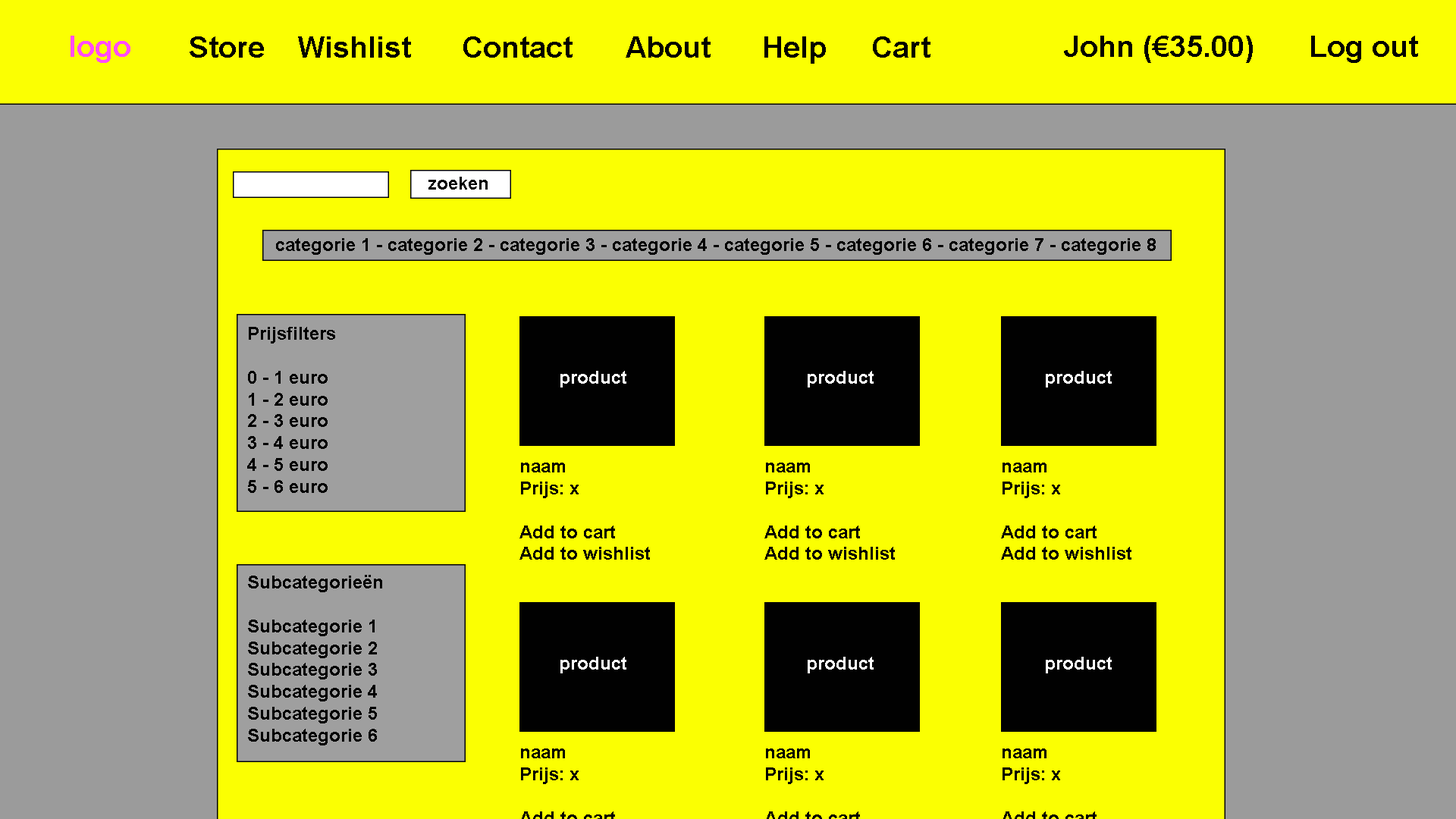
<style>
.page{position:relative;width:1456px;height:819px;background:#fbff02}
.page>*{position:absolute;margin:0}
.t1{font:29.6px "Arial-BoldMT";color:#ff4cff}
.t2{font:29.6px "Arial-BoldMT";color:#000000}
.t3{font:29.6px "Arial-BoldMT";color:#010101}
.t4{font:18.2px "Arial-BoldMT";color:#010101}
.t5{font:18.2px "Arial-BoldMT";color:#000000}
.t6{font:18.2px "Arial-BoldMT";color:#ffffff}
</style>
<div class="page">
<p class="t1" style="left:71px;top:36px;width:59px;height:27px">logo</p>
<p class="t2" style="left:190px;top:36px;width:740px;height:28px">Store  Wishlist  Contact  About  Help  Cart</p>
<p class="t3" style="left:1064px;top:36px;width:354px;height:27px">John (€35.00)  Log out</p>
<p class="t4" style="left:428px;top:177px;width:60px;height:13px">zoeken</p>
<p class="t5" style="left:276px;top:238px;width:880px;height:17px">categorie 1 - categorie 2 - categorie 3 - categorie 4 - categorie 5 - categorie 6 - categorie 7 - categorie 8</p>
<p class="t5" style="left:247px;top:327px;width:88px;height:166px">Prijsfilters<br><br>0 - 1 euro<br>1 - 2 euro<br>2 - 3 euro<br>3 - 4 euro<br>4 - 5 euro<br>5 - 6 euro</p>
<p class="t6" style="left:560px;top:371px;width:66px;height:17px">product</p>
<p class="t6" style="left:808px;top:371px;width:66px;height:17px">product</p>
<p class="t6" style="left:1046px;top:371px;width:66px;height:17px">product</p>
<p class="t4" style="left:519px;top:463px;width:131px;height:97px">naam<br>Prijs: x<br><br>Add to cart<br>Add to wishlist</p>
<p class="t4" style="left:764px;top:463px;width:131px;height:97px">naam<br>Prijs: x<br><br>Add to cart<br>Add to wishlist</p>
<p class="t4" style="left:1001px;top:463px;width:130px;height:97px">naam<br>Prijs: x<br><br>Add to cart<br>Add to wishlist</p>
<p class="t5" style="left:248px;top:575px;width:134px;height:170px">Subcategorieën<br><br>Subcategorie 1<br>Subcategorie 2<br>Subcategorie 3<br>Subcategorie 4<br>Subcategorie 5<br>Subcategorie 6</p>
<p class="t6" style="left:560px;top:657px;width:66px;height:16px">product</p>
<p class="t6" style="left:808px;top:657px;width:66px;height:16px">product</p>
<p class="t6" style="left:1046px;top:657px;width:66px;height:16px">product</p>
</div>
